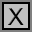
<style>
.page{position:relative;width:32px;height:32px;background:#bfbfbf}
.page>*{position:absolute;margin:0}
.t1{font:32px "CenturyGothic";color:#000000}
</style>
<div class="page">
<p class="t1" style="left:8px;top:8px;width:16px;height:17px">x</p>
</div>
